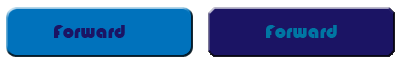
<style>
.page{position:relative;width:400px;height:64px;background:#1b1464}
.page>*{position:absolute;margin:0}
.t1{font:20px "Bauhaus93";color:#1b1464}
.t2{font:20px "Bauhaus93";color:#0076a3}
</style>
<div class="page">
<p class="t1" style="left:54px;top:25px;width:71px;height:13px">Forward</p>
<p class="t2" style="left:266px;top:25px;width:71px;height:13px">Forward</p>
</div>
